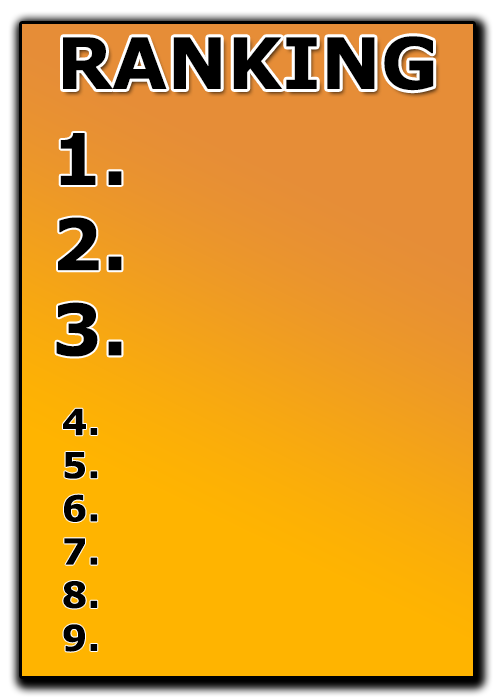
<style>
.page{position:relative;width:500px;height:700px}
.page>*{position:absolute;margin:0}
.t1{font:71px "Verdana-Bold";color:#000000}
.t2{font:36px "Verdana-Bold";color:#000000}
</style>
<div class="page">
<p class="t1" style="left:63px;top:36px;width:371px;height:55px">RANKING</p>
<p class="t1" style="left:56px;top:133px;width:66px;height:224px;text-align:center">1.<br>2.<br>3.</p>
<p class="t2" style="left:63px;top:408px;width:35px;height:244px;text-align:center">4.<br>5.<br>6.<br>7.<br>8.<br>9.</p>
</div>
